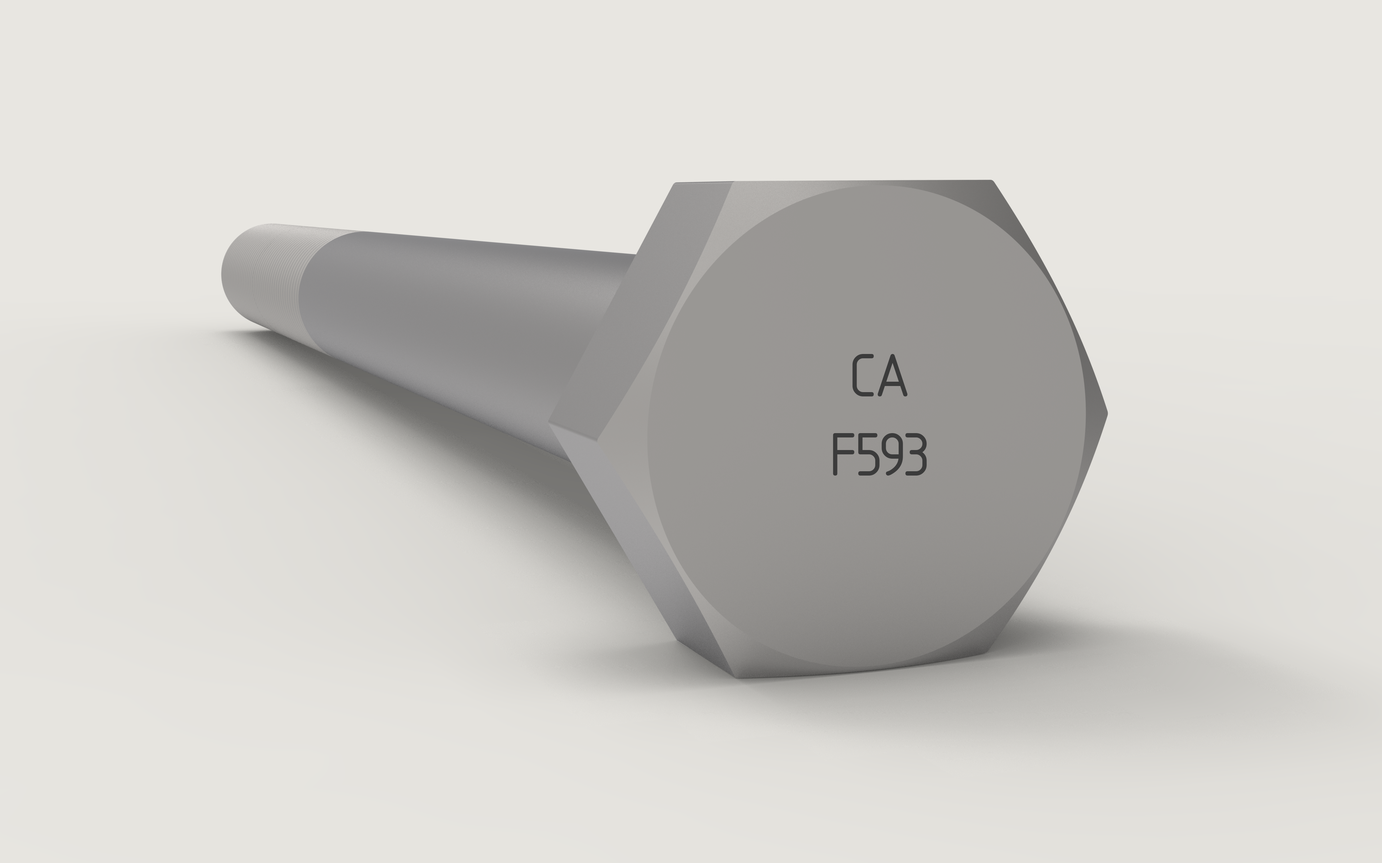
<style>
.page{position:relative;width:1382px;height:863px;background:#e8e6e1}
.page>*{position:absolute;margin:0}
.t1{font:66px "ISOCPEUR";letter-spacing:-0.05em;color:#3b3b3b}
</style>
<div class="page">
<p class="t1" style="left:833px;top:354px;width:93px;height:122px;text-align:center">CA<br>F593</p>
</div>
